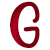
<style>
.page{position:relative;width:50px;height:50px;background:#ffffff}
.page>*{position:absolute;margin:0}
.t1{font:70.9px "GoodUnicorn-Regular";color:#7e0110}
</style>
<div class="page">
<p class="t1" style="left:10px;top:1px;width:30px;height:47px">G</p>
</div>
